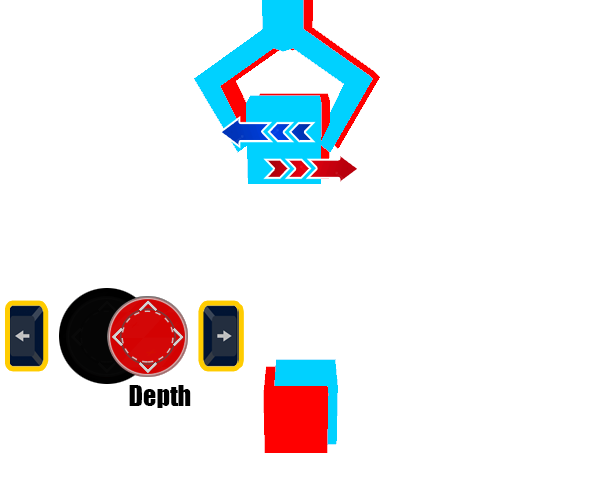
<style>
.page{position:relative;width:600px;height:480px;background:#ffffff}
.page>*{position:absolute;margin:0}
.t1{font:26px "Impact";color:#000000}
</style>
<div class="page">
<p class="t1" style="left:129px;top:385px;width:62px;height:23px">Depth</p>
</div>
